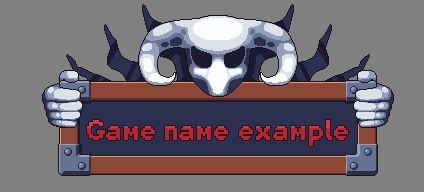
<style>
.page{position:relative;width:424px;height:192px;background:#808080}
.page>*{position:absolute;margin:0}
.t1{font:30px "Planes_ValMore-Bold";color:#c3242f}
</style>
<div class="page">
<p class="t1" style="left:87px;top:120px;width:261px;height:26px;opacity:0.93">Game name example</p>
</div>
